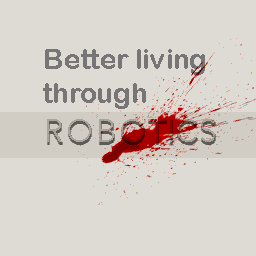
<style>
.page{position:relative;width:256px;height:256px;background:#dedbd5}
.page>*{position:absolute;margin:0}
.t1{font:28.1px "ArialRoundedMTBold";color:#777575}
</style>
<div class="page">
<p class="t1" style="left:43px;top:49px;width:162px;height:60px">Better living<br>through</p>
</div>
